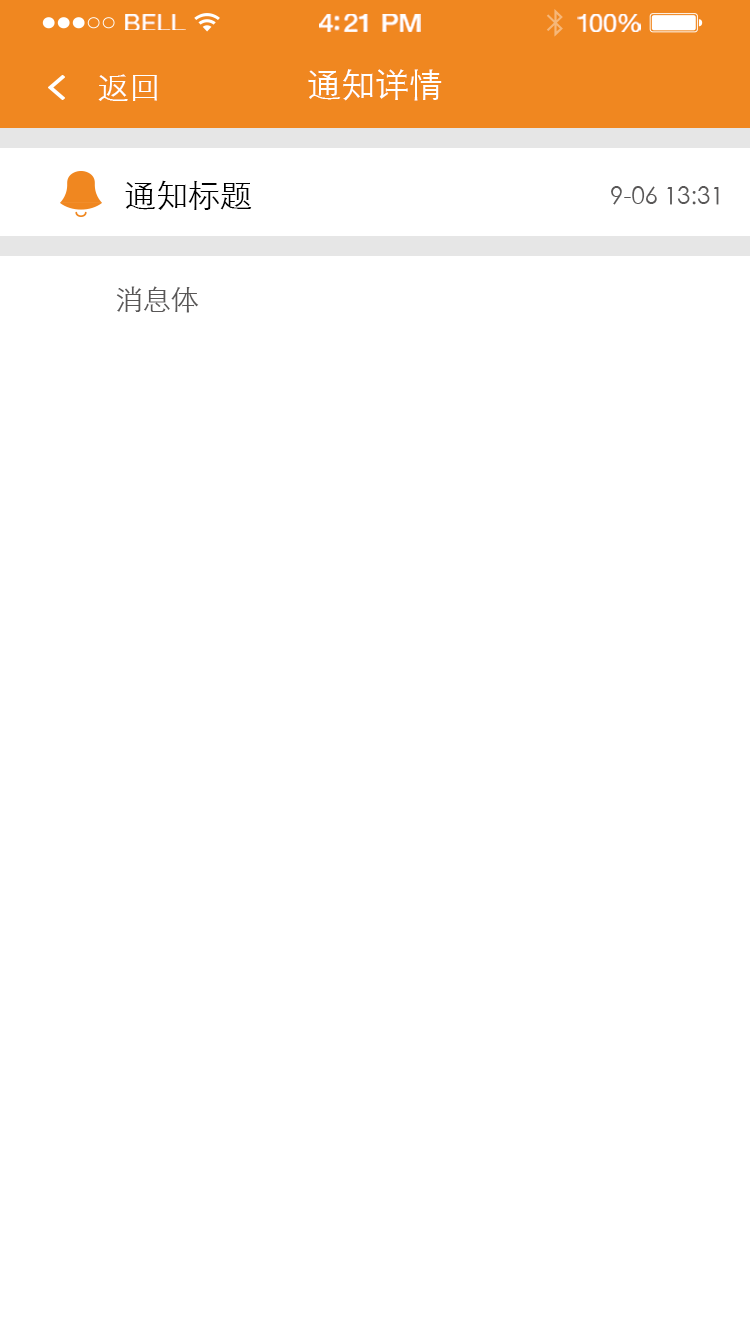
<style>
.page{position:relative;width:750px;height:1334px;background:#ffffff}
.page>*{position:absolute;margin:0}
.t1{font:23.3px "HelveticaNeue";letter-spacing:0.02em;color:#ffffff;scale:1.06 1}
.t2{font:25.3px "HelveticaNeue-Medium";letter-spacing:-0.02em;color:#ffffff;scale:1.06 1}
.t3{font:24.3px "HelveticaNeue";letter-spacing:-0.02em;color:#ffffff;scale:1.06 1}
.t4{font:32px "STXihei";color:#ffffff}
.t5{font:34px "STXihei";color:#ffffff}
.t6{font:32px "STXihei";color:#000000}
.t7{font:24px "STXihei";color:#595757}
.t8{font:28px "STXihei";color:#595757}
</style>
<div class="page">
<p class="t1" style="left:125px;top:14px;width:61px;height:16px">BELL</p>
<p class="t2" style="left:319px;top:14px;width:102px;height:18px">4:21 PM</p>
<p class="t3" style="left:577px;top:14px;width:64px;height:18px">100%</p>
<p class="t4" style="left:98px;top:74px;width:59px;height:27px">返回</p>
<p class="t5" style="left:308px;top:69px;width:134px;height:32px">通知详情</p>
<p class="t6" style="left:125px;top:180px;width:127px;height:30px">通知标题</p>
<p class="t7" style="left:611px;top:186px;width:108px;height:19px">9-06 13:31</p>
<p class="t8" style="left:116px;top:286px;width:83px;height:27px">消息体</p>
</div>
